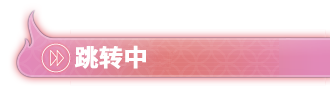
<style>
.page{position:relative;width:330px;height:90px;background:#ffffff}
.page>*{position:absolute;margin:0}
.t1{font:24px "SourceHanSansSC-Bold";color:#ffffff;font-weight:bold}
</style>
<div class="page">
<p class="t1" style="left:74px;top:45px;width:72px;height:24px">跳转中</p>
</div>
